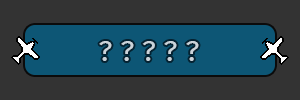
<style>
.page{position:relative;width:300px;height:100px;background:#333333}
.page>*{position:absolute;margin:0}
.t1{font:30px "FiraSans-Regular";color:#cad3da}
</style>
<div class="page">
<p class="t1" style="left:99px;top:41px;width:100px;height:20px">? ? ? ? ?</p>
</div>
